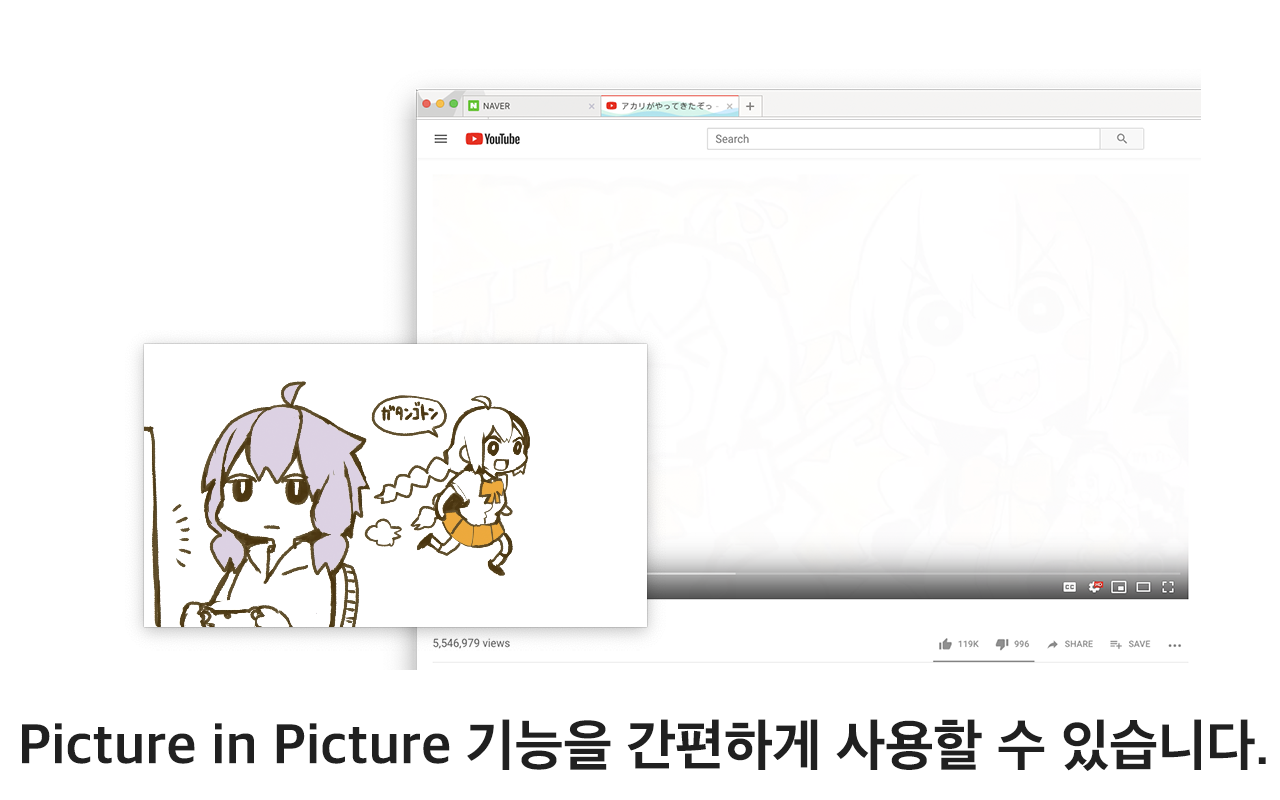
<style>
.page{position:relative;width:1280px;height:800px;background:#ffffff}
.page>*{position:absolute;margin:0}
.t1{font:56.3px "AppleSDGothicNeo-Bold";color:#202020}
</style>
<div class="page">
<p class="t1" style="left:22px;top:719px;width:1244px;height:52px">Picture in Picture 기능을 간편하게 사용할 수 있습니다.</p>
</div>
